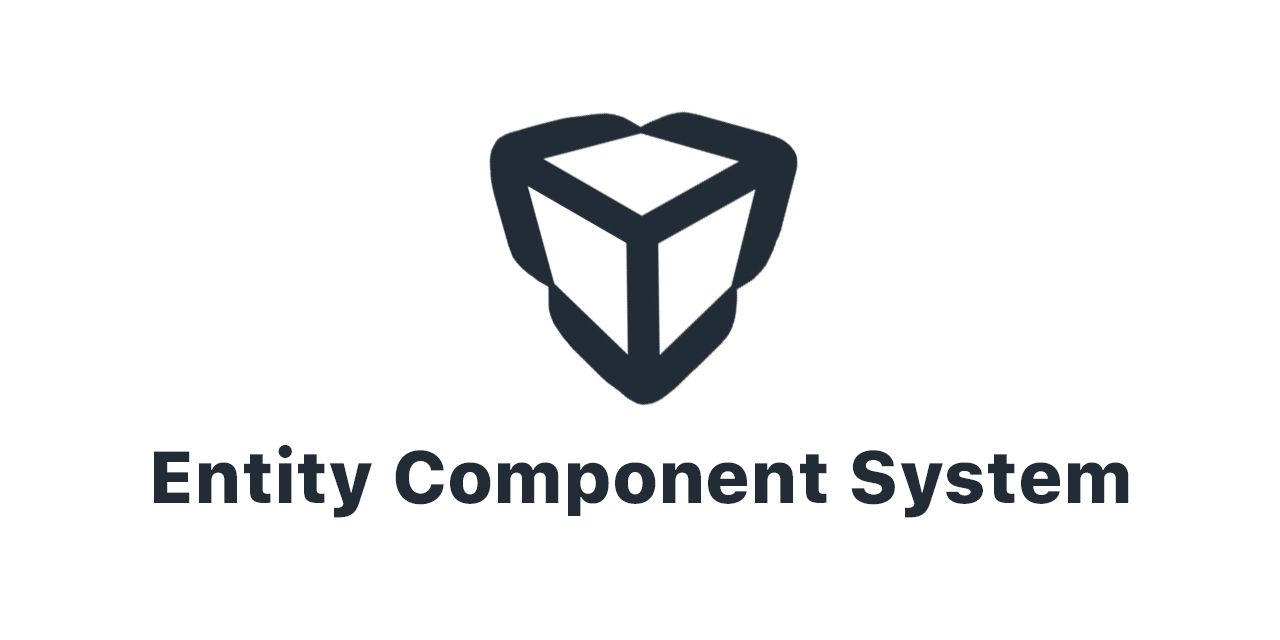
<style>
.page{position:relative;width:1280px;height:640px;background:#ffffff}
.page>*{position:absolute;margin:0}
.t1{font:73px "SFProText-Heavy";color:#222c36}
</style>
<div class="page">
<p class="t1" style="left:154px;top:444px;width:975px;height:74px">Entity Component System</p>
</div>
